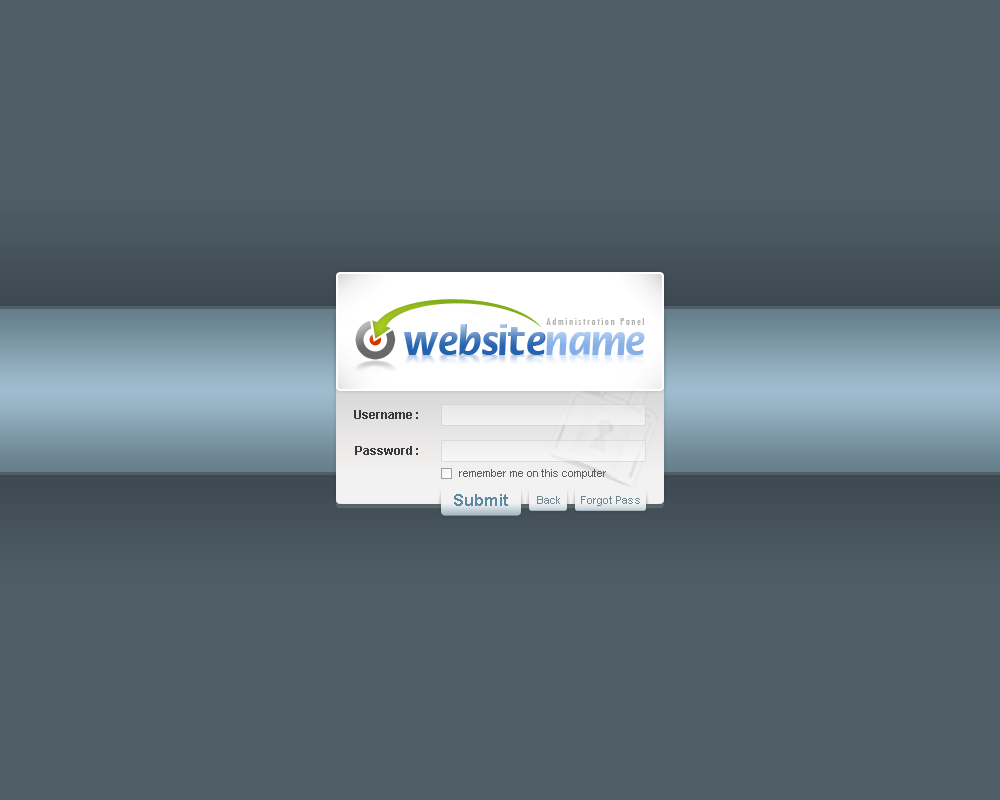
<style>
.page{position:relative;width:1000px;height:800px;background:#4f5e67}
.page>*{position:absolute;margin:0}
.t1{font:12px "Arial-BoldMT";color:#3a3a3a}
.t2{font:11px "ArialMT";color:#5f5f5f}
.t3{font:16px "Arial-BoldMT";letter-spacing:0.02em;color:#5b89a4}
.t4{font:11px "ArialMT";letter-spacing:0.02em;color:#708592}
</style>
<div class="page">
<p class="t1" style="left:354px;top:410px;width:64px;height:9px">Username :</p>
<p class="t1" style="left:355px;top:446px;width:63px;height:9px">Password :</p>
<p class="t2" style="left:459px;top:469px;width:147px;height:10px">remember me on this computer</p>
<p class="t3" style="left:454px;top:494px;width:54px;height:12px">Submit</p>
<p class="t4" style="left:537px;top:496px;width:23px;height:8px">Back</p>
<p class="t4" style="left:581px;top:496px;width:59px;height:10px">Forgot Pass</p>
</div>
